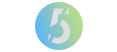
<style>
.page{position:relative;width:117px;height:52px;background:#ffffff}
.page>*{position:absolute;margin:0}
.t1{font:45.7px "FuturaStd-Heavy";letter-spacing:-0.01em;color:#dfdfdf}
</style>
<div class="page">
<p class="t1" style="left:47px;top:8px;width:24px;height:36px">5</p>
</div>
